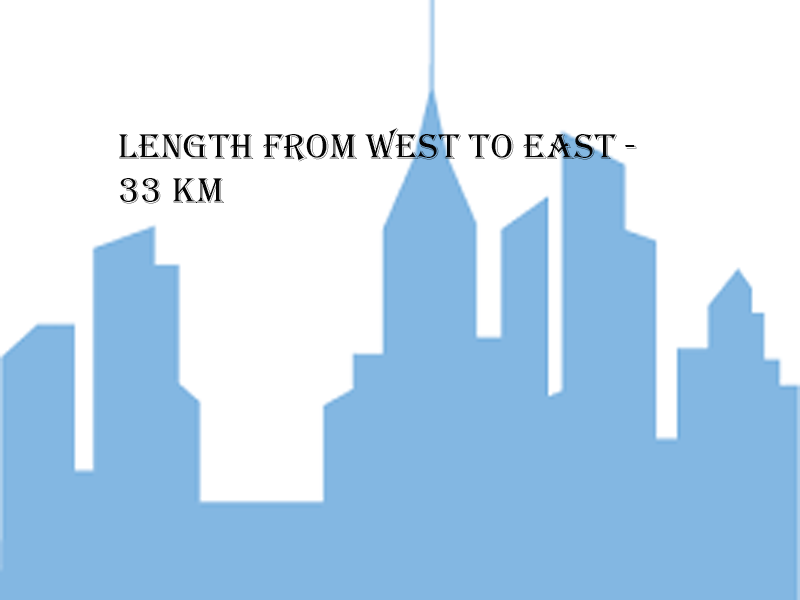
<style>
.page{position:relative;width:800px;height:600px;background:#ffffff}
.page>*{position:absolute;margin:0}
.t1{font:37px "Algerian";color:#050505}
</style>
<div class="page">
<p class="t1" style="left:119px;top:127px;width:518px;height:77px">length from west to east -<br>33 km</p>
</div>
